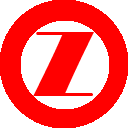
<style>
.page{position:relative;width:128px;height:128px;background:#ff0000}
.page>*{position:absolute;margin:0}
.t1{font:96px "Broadway";color:#ff0000}
</style>
<div class="page">
<p class="t1" style="left:33px;top:32px;width:61px;height:64px">Z</p>
</div>
